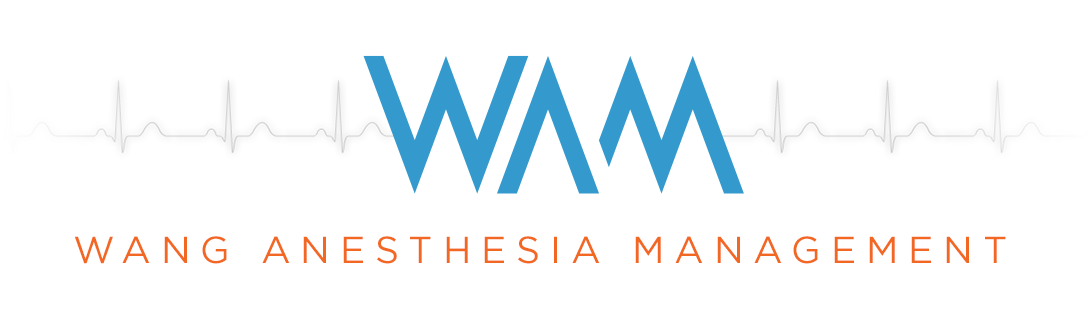
<style>
.page{position:relative;width:1088px;height:314px;background:#ffffff}
.page>*{position:absolute;margin:0}
.t1{font:37.5px "Gotham-Book";letter-spacing:0.265em;color:#f26722}
</style>
<div class="page">
<p class="t1" style="left:74px;top:236px;width:932px;height:28px">WANG ANESTHESIA MANAGEMENT</p>
</div>
